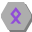
<style>
.page{position:relative;width:32px;height:32px;background:#adadad}
.page>*{position:absolute;margin:0}
.t1{font:22px "Stormning";letter-spacing:0.075em;color:#914dd6}
</style>
<div class="page">
<p class="t1" style="left:10px;top:7px;width:12px;height:17px">o</p>
</div>
